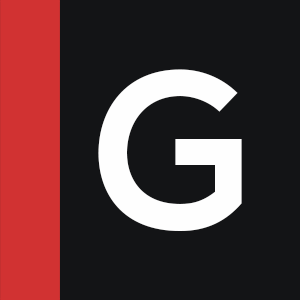
<style>
.page{position:relative;width:300px;height:300px;background:#131416}
.page>*{position:absolute;margin:0}
.t1{font:220px "NexaBold";color:#fefefe}
</style>
<div class="page">
<p class="t1" style="left:98px;top:69px;width:144px;height:162px">G</p>
</div>
